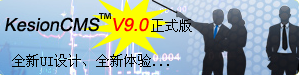
<style>
.page{position:relative;width:300px;height:76px}
.page>*{position:absolute;margin:0}
.t1{font:18px "ArialMT";color:#000000;font-style:italic}
.t2{font:18px "ArialMT";color:#ff0000;font-style:italic}
.t3{font:14px "SimSun";color:#000000}
</style>
<div class="page">
<p class="t1" style="left:5px;top:17px;width:95px;height:15px">KesionCMS</p>
<p class="t2" style="left:113px;top:18px;width:36px;height:14px">V9.0</p>
<p class="t3" style="left:151px;top:19px;width:41px;height:13px">正式版</p>
<p class="t3" style="left:12px;top:54px;width:157px;height:13px">全新UI设计、全新体验...</p>
</div>
